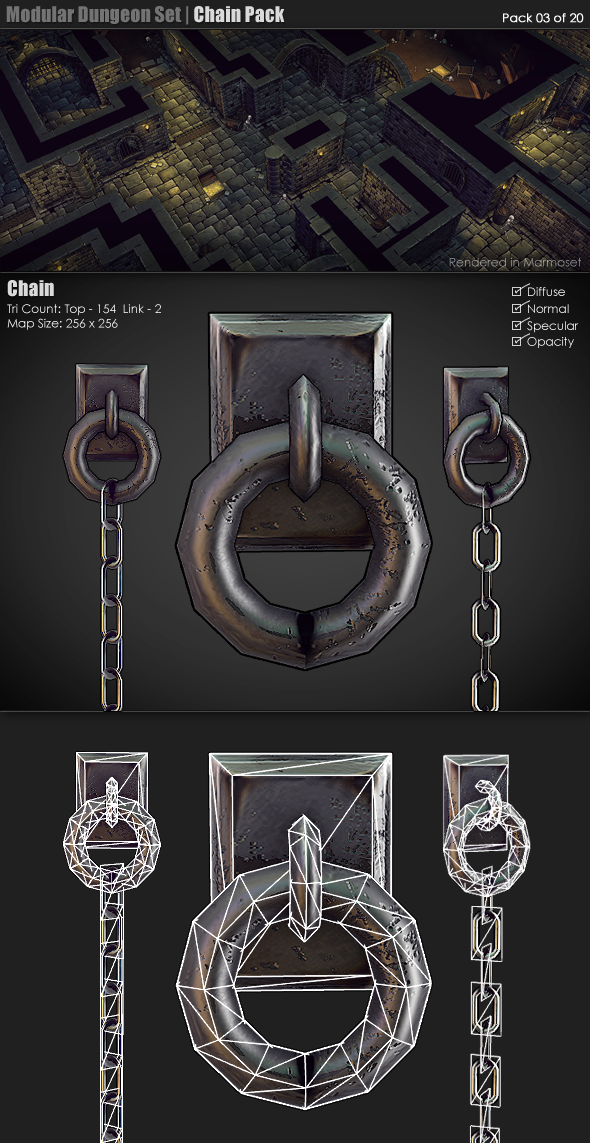
<style>
.page{position:relative;width:590px;height:1143px;background:#202020}
.page>*{position:absolute;margin:0}
.t1{font:20px "Impact";color:#737373}
.t2{font:20px "Impact";color:#dadada}
.t3{font:12px "CenturyGothic";color:#ffffff;font-weight:bold}
.t4{font:12px "CenturyGothic";color:#a0a09c}
.t5{font:12px "CenturyGothic";color:#ffffff}
</style>
<div class="page">
<p class="t1" style="left:6px;top:6px;width:279px;height:19px">Modular Dungeon Set |<span class="t2"> Chain Pack</span></p>
<p class="t3" style="left:503px;top:13px;width:81px;height:10px">Pack 03 of 20</p>
<p class="t4" style="left:449px;top:257px;width:132px;height:10px">Rendered in Marmoset</p>
<p class="t2" style="left:7px;top:280px;width:47px;height:17px">Chain</p>
<p class="t5" style="left:7px;top:304px;width:154px;height:26px">Tri Count: Top - 154  Link - 2<br>Map Size: 256 x 256</p>
<p class="t5" style="left:527px;top:337px;width:47px;height:11px">Opacity</p>
</div>
